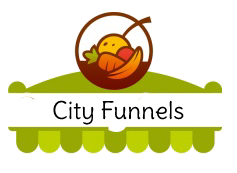
<style>
.page{position:relative;width:237px;height:173px;background:#ffffff}
.page>*{position:absolute;margin:0}
.t1{font:24px "Delius-Regular";color:#000000}
</style>
<div class="page">
<p class="t1" style="left:53px;top:100px;width:131px;height:25px">City Funnels</p>
</div>
